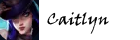
<style>
.page{position:relative;width:140px;height:40px;background:#ffffff}
.page>*{position:absolute;margin:0}
.t1{font:12px "VinerHandITC";color:#000000}
</style>
<div class="page">
<p class="t1" style="left:47px;top:12px;width:62px;height:22px">Caitlyn</p>
</div>
